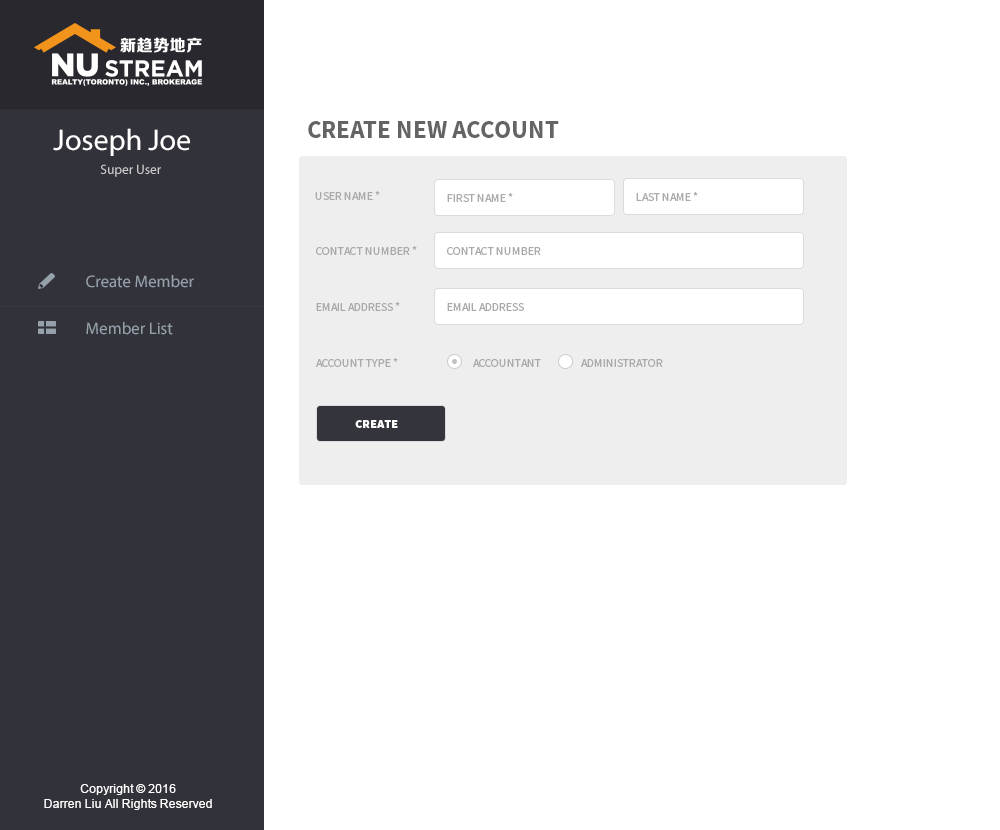
<style>
.page{position:relative;width:1000px;height:830px;background:#ffffff}
.page>*{position:absolute;margin:0}
.t1{font:25px "SourceSansPro-Bold";color:#616161}
.t2{font:30px "MyriadPro-Regular";color:#ffffff}
.t3{font:13.4px "MyriadPro-Regular";color:#cccccc}
.t4{font:12px "SourceSansPro-Regular";color:#a9a9a9}
.t5{font:16.8px "MyriadPro-Regular";color:#95a0aa}
.t6{font:12px "SourceSansPro-Black";color:#ffffff}
.t7{font:12px "ArialMT";color:#ffffff}
</style>
<div class="page">
<p class="t1" style="left:308px;top:121px;width:251px;height:17px">CREATE NEW ACCOUNT</p>
<p class="t2" style="left:53px;top:128px;width:137px;height:28px">Joseph Joe</p>
<p class="t3" style="left:100px;top:164px;width:61px;height:13px">Super User</p>
<p class="t4" style="left:315px;top:191px;width:65px;height:9px">USER NAME *</p>
<p class="t4" style="left:447px;top:193px;width:66px;height:9px">FIRST NAME *</p>
<p class="t4" style="left:636px;top:192px;width:62px;height:9px">LAST NAME *</p>
<p class="t4" style="left:316px;top:246px;width:101px;height:9px">CONTACT NUMBER *</p>
<p class="t4" style="left:447px;top:247px;width:94px;height:8px">CONTACT NUMBER</p>
<p class="t5" style="left:86px;top:275px;width:108px;height:13px">Create Member</p>
<p class="t4" style="left:316px;top:302px;width:84px;height:9px">EMAIL ADDRESS *</p>
<p class="t4" style="left:447px;top:303px;width:77px;height:8px">EMAIL ADDRESS</p>
<p class="t5" style="left:86px;top:322px;width:87px;height:13px">Member List</p>
<p class="t4" style="left:316px;top:358px;width:82px;height:9px">ACCOUNT TYPE *</p>
<p class="t4" style="left:473px;top:359px;width:68px;height:8px">ACCOUNTANT</p>
<p class="t4" style="left:581px;top:359px;width:82px;height:8px">ADMINISTRATOR</p>
<p class="t6" style="left:355px;top:420px;width:43px;height:8px">CREATE</p>
<p class="t7" style="left:44px;top:784px;width:168px;height:26px;text-align:center">Copyright © 2016<br>Darren Liu All Rights Reserved</p>
</div>
